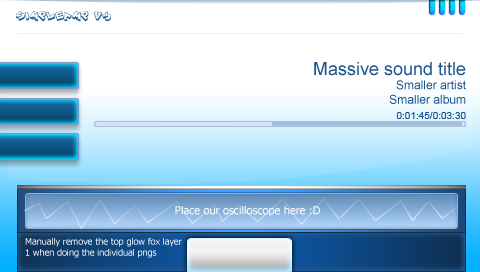
<style>
.page{position:relative;width:480px;height:272px;background:#ffffff}
.page>*{position:absolute;margin:0}
.t1{font:11px "ZoinkFat";color:#1a538d}
.t2{font:12px "ArialMT";color:#1a538d}
.t3{font:18px "ArialMT";color:#1a538d}
.t4{font:10px "ArialMT";color:#1a538d}
.t5{font:11px "Tahoma";color:#ffffff}
.t6{font:9px "Tahoma";color:#ffffff}
</style>
<div class="page">
<p class="t1" style="left:16px;top:11px;width:95px;height:11px">SIMPLEAMP V3</p>
<p class="t2" style="left:314px;top:62px;width:152px;height:42px;text-align:right"><span class="t3">Massive sound title<br></span>Smaller artist<br>Smaller album</p>
<p class="t4" style="left:396px;top:112px;width:70px;height:7px">0:01:45/0:03:30</p>
<p class="t5" style="left:175px;top:206px;width:145px;height:11px">Place our oscilloscope here :D</p>
<p class="t6" style="left:25px;top:238px;width:157px;height:20px">Manually remove the top glow fox layer 1 when doing the individual pngs</p>
</div>
